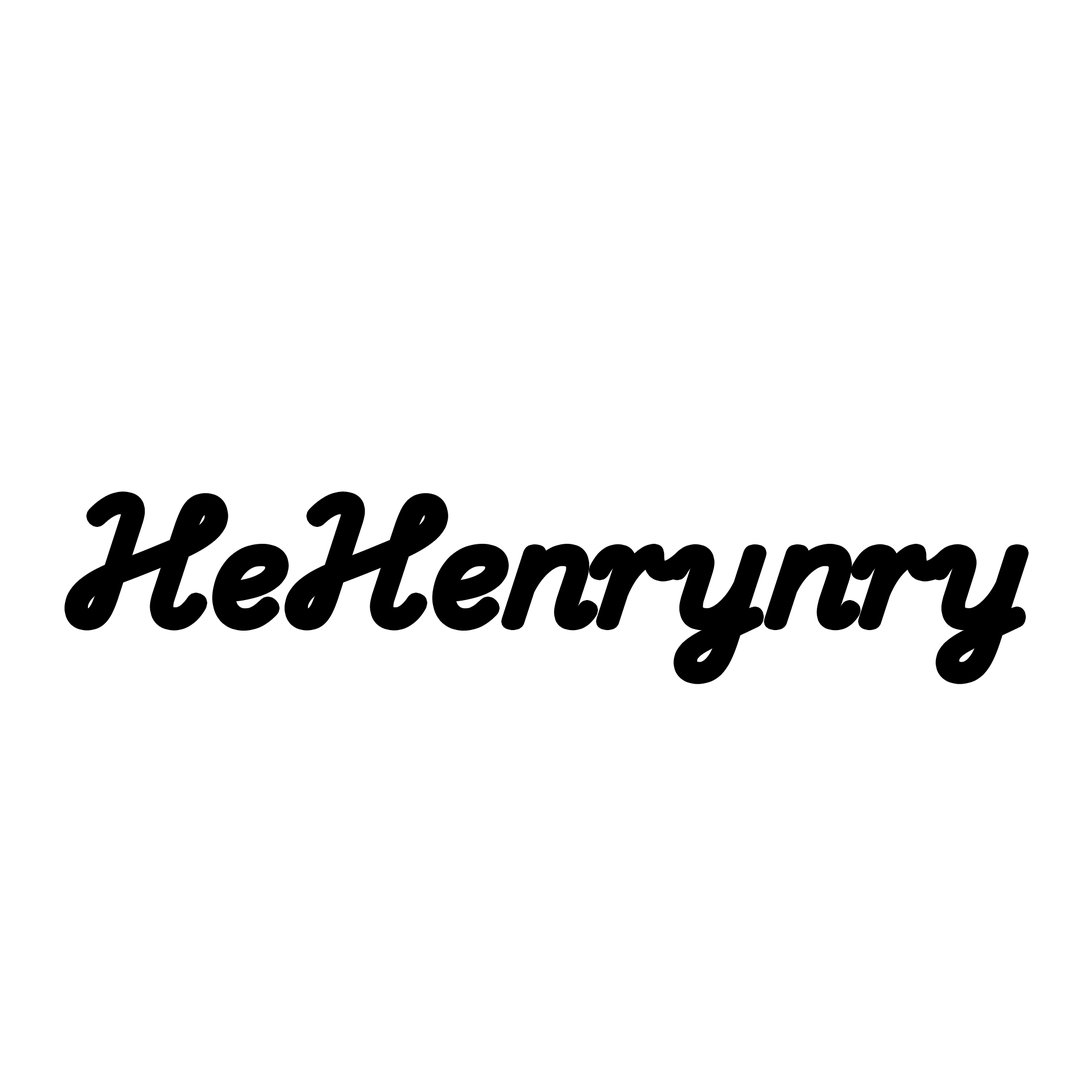
<style>
.page{position:relative;width:1092px;height:1092px;background:#ffffff}
.page>*{position:absolute;margin:0}
.t1{font:140.8px "PlaywriteHR-Regular";color:#000000}
</style>
<div class="page">
<p class="t1" style="left:70px;top:497px;width:953px;height:182px">HeHenrynry</p>
</div>
